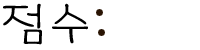
<style>
.page{position:relative;width:200px;height:50px;background:#ffffff}
.page>*{position:absolute;margin:0}
.t1{font:49.7px "MDEasop";color:#000000}
</style>
<div class="page">
<p class="t1" style="left:3px;top:3px;width:85px;height:42px">점수</p>
</div>
